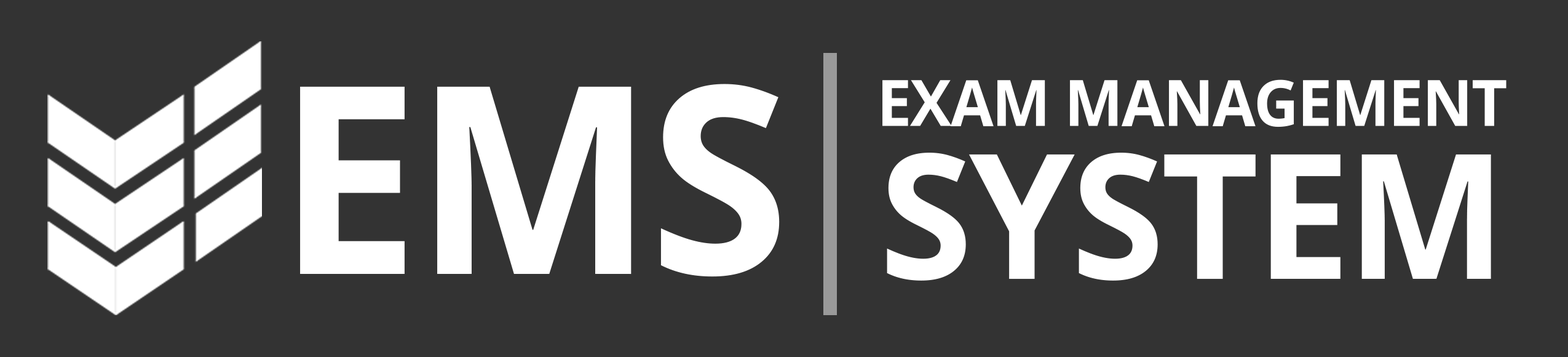
<style>
.page{position:relative;width:1568px;height:357px;background:#333333}
.page>*{position:absolute;margin:0}
.t1{font:261.8px "OpenSans-Bold";letter-spacing:-0.02em;color:#ffffff}
.t2{font:64px "OpenSans-Bold";letter-spacing:-0.02em;color:#ffffff}
.t3{font:174.3px "OpenSans-Bold";letter-spacing:-0.02em;color:#ffffff}
</style>
<div class="page">
<p class="t1" style="left:300px;top:84px;width:480px;height:193px">EMS</p>
<p class="t2" style="left:882px;top:79px;width:625px;height:48px">EXAM MANAGEMENT</p>
<p class="t3" style="left:887px;top:152px;width:604px;height:128px">SYSTEM</p>
</div>
